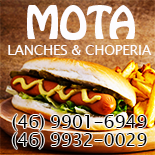
<style>
.page{position:relative;width:155px;height:155px}
.page>*{position:absolute;margin:0}
.t1{font:40px "HoboStd";letter-spacing:-0.025em;color:#fdfcfe}
.t2{font:14px "LucidaSansUnicode";letter-spacing:-0.025em;color:#fdfcfe}
.t3{font:18px/18px "LucidaSansUnicode";letter-spacing:-0.025em;color:#000000}
</style>
<div class="page">
<p class="t1" style="left:27px;top:5px;width:108px;height:35px">MOTA</p>
<p class="t2" style="left:8px;top:45px;width:144px;height:10px">LANCHES &amp; CHOPERIA</p>
<p class="t3" style="left:12px;top:114px;width:135px;height:35px;text-align:center">(46) 9901-6949<br>(46) 9932-0029</p>
</div>
